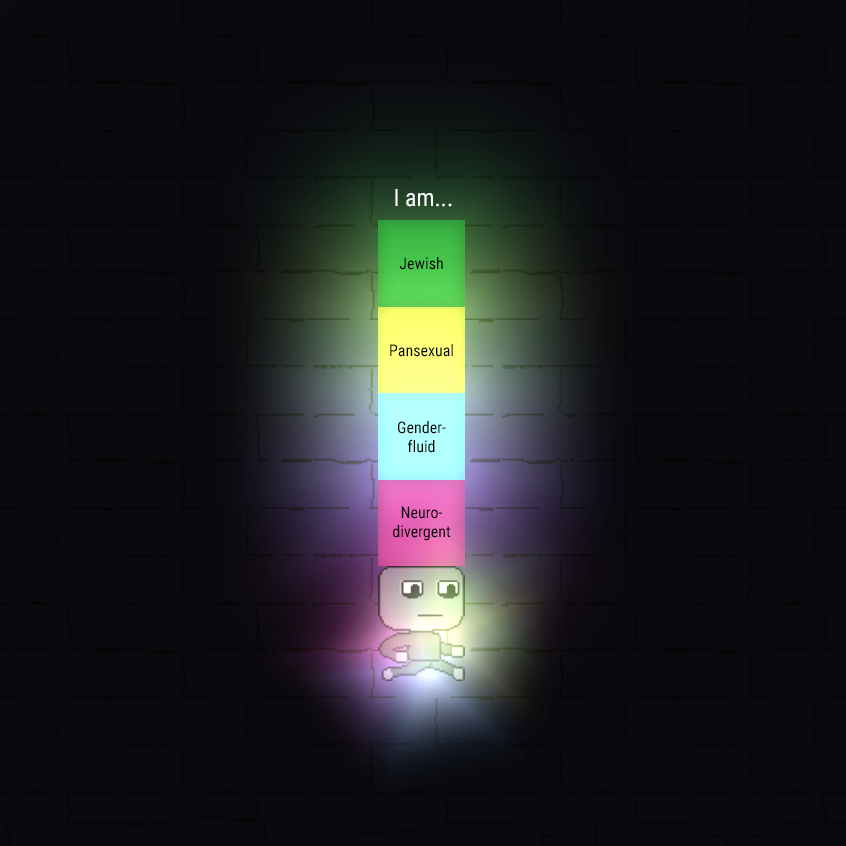
<style>
.page{position:relative;width:846px;height:846px;background:#0a090e}
.page>*{position:absolute;margin:0}
.t1{font:24px "RobotoCondensed-Regular";color:#ffffff}
.t2{font:16px "RobotoCondensed-Regular";color:#000000}
</style>
<div class="page">
<p class="t1" style="left:395px;top:189px;width:57px;height:18px">I am...</p>
<p class="t2" style="left:399px;top:257px;width:44px;height:13px">Jewish</p>
<p class="t2" style="left:390px;top:344px;width:63px;height:13px">Pansexual</p>
<p class="t2" style="left:398px;top:421px;width:48px;height:32px;text-align:center">Gender-<br>fluid</p>
<p class="t2" style="left:393px;top:506px;width:58px;height:35px;text-align:center">Neuro-<br>divergent</p>
</div>
